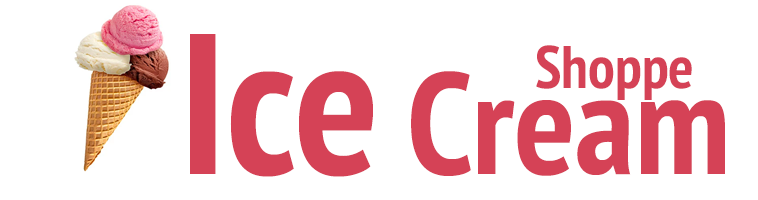
<style>
.page{position:relative;width:758px;height:200px;background:#ffffff}
.page>*{position:absolute;margin:0}
.t1{font:144px "PTSans-NarrowBold";color:#d54256}
.t2{font:200px "PTSans-NarrowBold";color:#d54256}
.t3{font:60px "PTSans-NarrowBold";color:#d54256}
</style>
<div class="page">
<p class="t1" style="left:190px;top:34px;width:535px;height:143px"><span class="t2">Ice</span> Cream</p>
<p class="t3" style="left:536px;top:45px;width:156px;height:55px">Shoppe</p>
</div>
